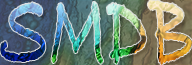
<style>
.page{position:relative;width:192px;height:65px}
.page>*{position:absolute;margin:0}
.t1{font:113.2px "BradleyHandITCTT-Bold";letter-spacing:0.025em;scale:0.56 1}
</style>
<div class="page">
<p class="t1" style="left:0px;top:0px;width:193px;height:65px">SMDB</p>
</div>
